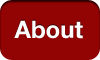
<style>
.page{position:relative;width:100px;height:60px;background:#920303}
.page>*{position:absolute;margin:0}
.t1{font:24px "HelveticaNeue-Bold";color:#ffffff}
</style>
<div class="page">
<p class="t1" style="left:14px;top:20px;width:69px;height:19px">About</p>
</div>
